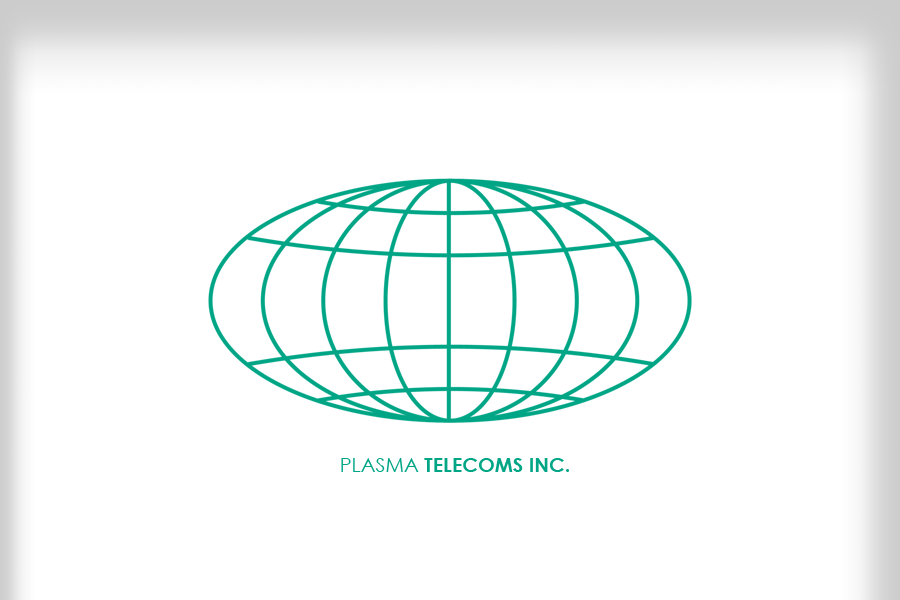
<style>
.page{position:relative;width:900px;height:600px;background:#ffffff}
.page>*{position:absolute;margin:0}
.t1{font:20px "CenturyGothic-Bold";color:#00a586}
.t2{font:20px "CenturyGothic";color:#00a586}
</style>
<div class="page">
<p class="t1" style="left:341px;top:458px;width:228px;height:14px"><span class="t2">PLASMA </span>TELECOMS INC.</p>
</div>
